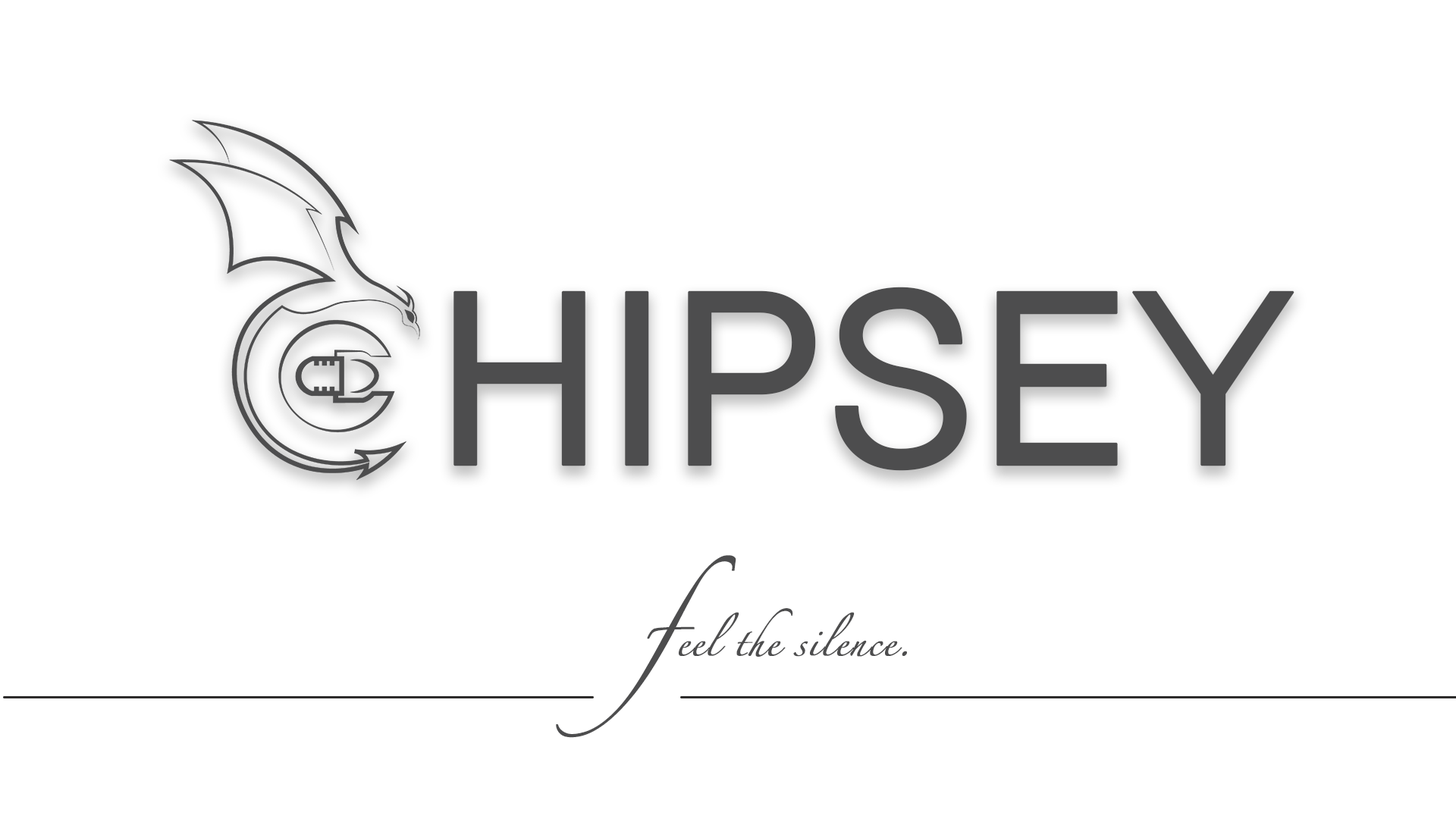
<style>
.page{position:relative;width:1456px;height:819px;background:#ffffff}
.page>*{position:absolute;margin:0}
.t1{font:229.4px "ShreeDev0714-Bold";letter-spacing:0.025em;color:#4d4d4e;font-weight:bold}
.t2{font:25.6px "Zapfino";letter-spacing:0.025em;color:#4d4d4e;font-weight:bold}
.t3{font:53.7px "Zapfino";letter-spacing:0.025em;color:#4d4d4e;font-weight:bold}
</style>
<div class="page">
<p class="t1" style="left:453px;top:287px;width:841px;height:184px">HIPSEY</p>
<p class="t2" style="left:556px;top:555px;width:351px;height:183px"><span class="t3">f</span>eel the silence.</p>
</div>
